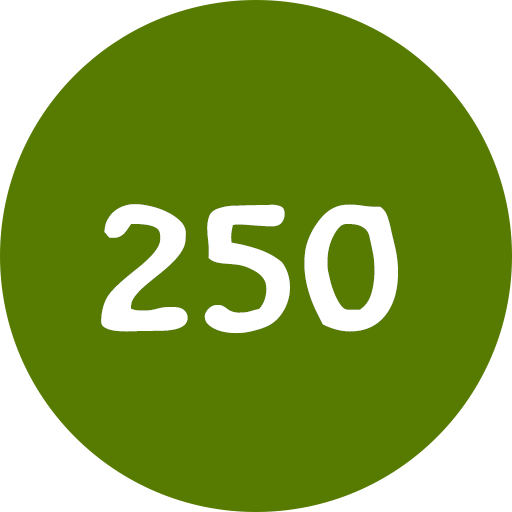
<style>
.page{position:relative;width:512px;height:512px;background:#577b00}
.page>*{position:absolute;margin:0}
.t1{font:250px "Arabica";color:#ffffff}
</style>
<div class="page">
<p class="t1" style="left:101px;top:204px;width:297px;height:130px">250</p>
</div>
